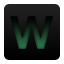
<style>
.page{position:relative;width:64px;height:64px;background:#ffffff}
.page>*{position:absolute;margin:0}
.t1{font:45.9px "HelveticaNeue-Bold";letter-spacing:0.02em}
</style>
<div class="page">
<p class="t1" style="left:10px;top:16px;width:43px;height:33px">W</p>
</div>
